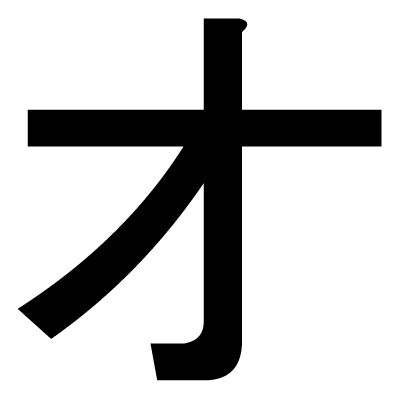
<style>
.page{position:relative;width:400px;height:400px;background:#ffffff}
.page>*{position:absolute;margin:0}
.t1{font:424.8px "MS-PGothic";color:#000000}
</style>
<div class="page">
<p class="t1" style="left:17px;top:18px;width:365px;height:363px">オ</p>
</div>
